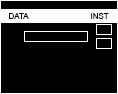
<style>
.page{position:relative;width:118px;height:94px;background:#000000}
.page>*{position:absolute;margin:0}
.t1{font:8px "ArialMT";color:#000000}
</style>
<div class="page">
<p class="t1" style="left:9px;top:13px;width:20px;height:6px">DATA</p>
<p class="t1" style="left:91px;top:13px;width:18px;height:6px">INST</p>
</div>
